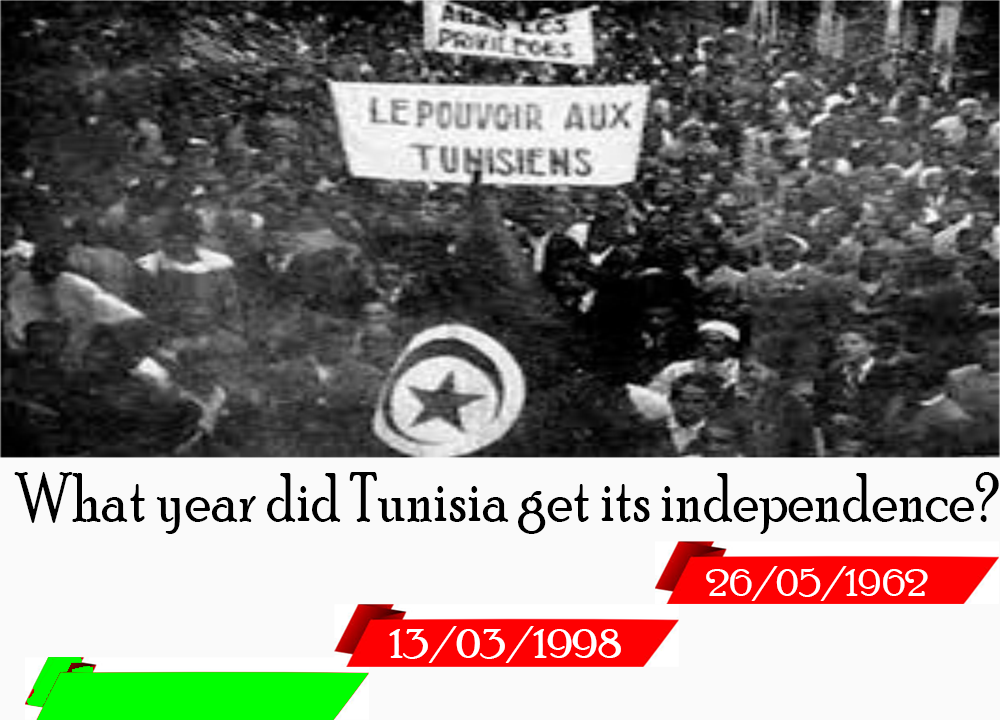
<style>
.page{position:relative;width:1000px;height:720px;background:#fafafa}
.page>*{position:absolute;margin:0}
.t1{font:69.1px "PoorRichard-Regular";color:#000000;scale:0.86 1}
.t2{font:37.7px "PoorRichard-Regular";color:#ffffff;scale:1.14 1}
.t3{font:40.7px "PoorRichard-Regular";color:#ffffff;scale:1.16 1}
</style>
<div class="page">
<p class="t1" style="left:14px;top:472px;width:985px;height:62px">What year did Tunisia get its independence?</p>
<p class="t2" style="left:706px;top:566px;width:222px;height:35px">26/05/1962</p>
<p class="t3" style="left:389px;top:626px;width:232px;height:37px">13/03/1998</p>
</div>
